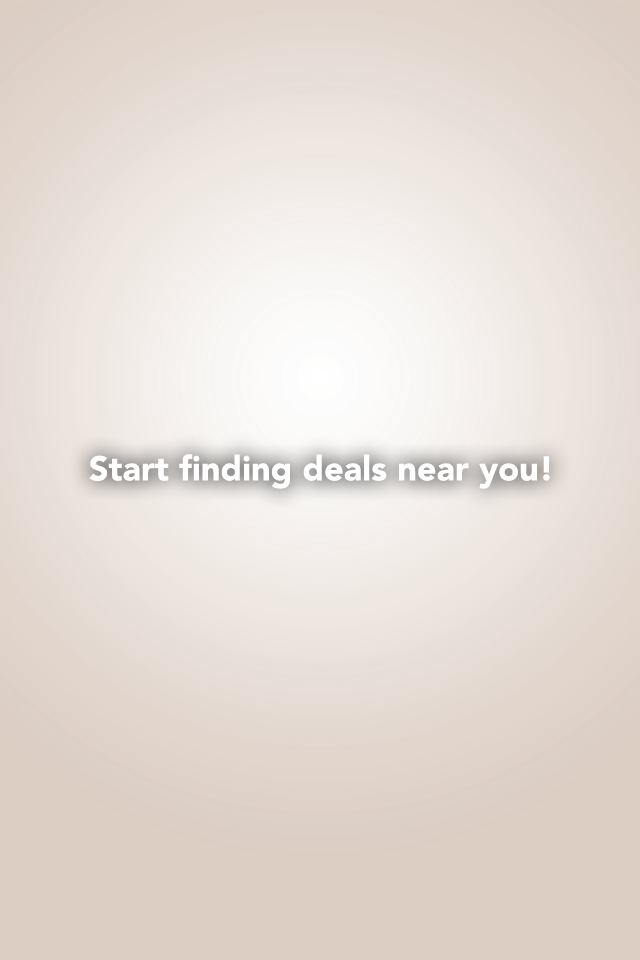
<style>
.page{position:relative;width:640px;height:960px}
.page>*{position:absolute;margin:0}
.t1{font:34px "Avenir-Black";letter-spacing:0.005em;color:#ffffff}
.t2{font:31.8px "Avenir-Heavy";letter-spacing:0.005em;color:#ffffff}
</style>
<div class="page">
<p class="t1" style="left:89px;top:454px;width:461px;height:35px"><span class="t2"><br></span>Start finding deals near you!</p>
</div>
